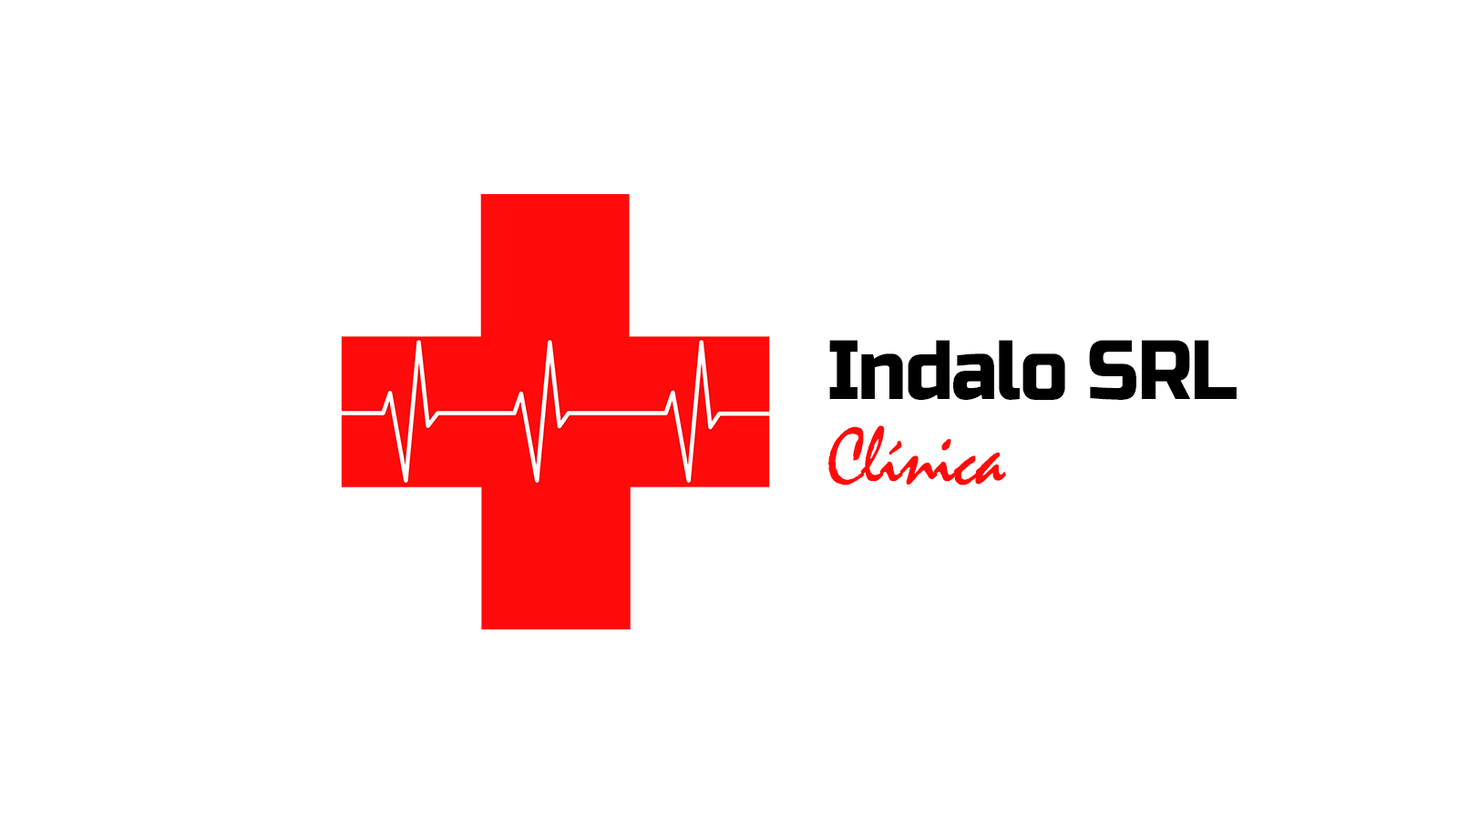
<style>
.page{position:relative;width:1458px;height:818px;background:#ffffff}
.page>*{position:absolute;margin:0}
.t1{font:84.1px/84.1px "RussoOne-Regular";letter-spacing:-0.025em;color:#000000;scale:0.92 1}
.t2{font:84.1px/84.1px "Mistral";letter-spacing:-0.025em;color:#ff0b0b;scale:0.92 1}
</style>
<div class="page">
<p class="t1" style="left:828px;top:340px;width:408px;height:146px">Indalo SRL<br><span class="t2">Clínica</span></p>
</div>
